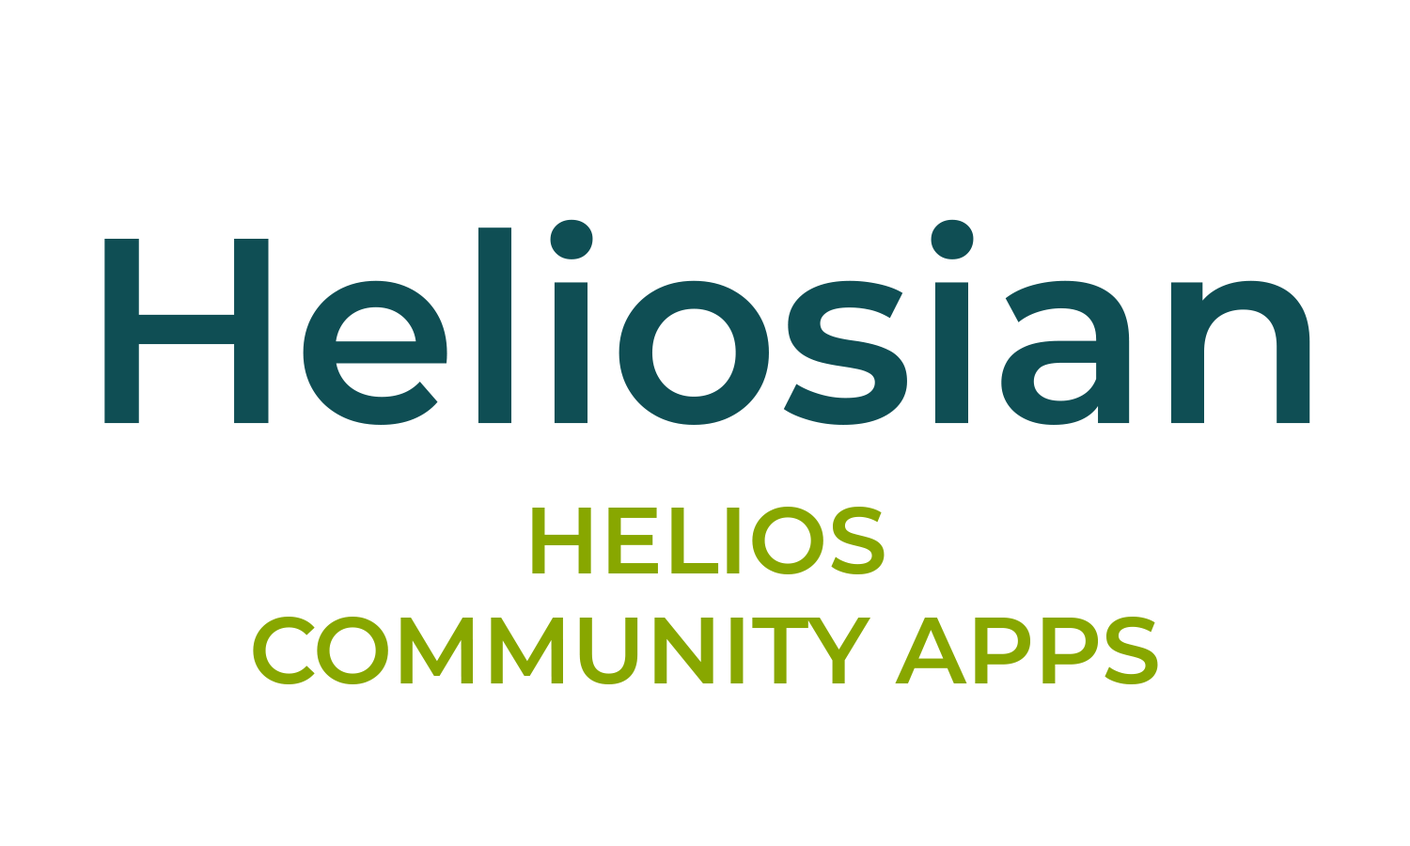
<style>
.page{position:relative;width:1410px;height:846px;background:#ffffff}
.page>*{position:absolute;margin:0}
.t1{font:263.1px "Montserrat-SemiBold";color:#0f4e54}
.t2{font:94px/0.2px "Montserrat-SemiBold";color:#88a700;text-transform:uppercase}
</style>
<div class="page">
<p class="t1" style="left:104px;top:219px;width:1206px;height:206px">Heliosian</p>
<p class="t2" style="left:253px;top:507px;width:905px;height:177px;text-align:center">HELIOS<br>COMMUNITY APPS</p>
</div>
